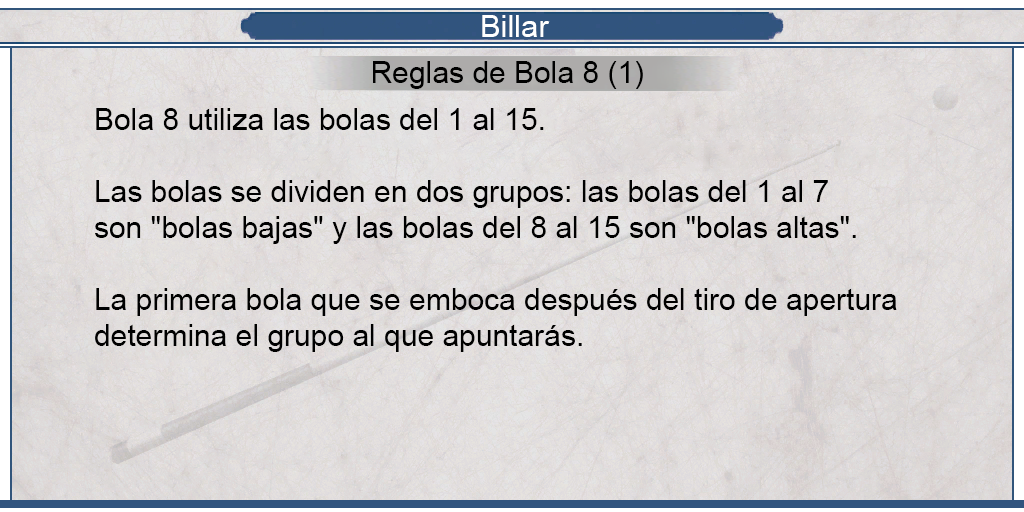
<style>
.page{position:relative;width:1024px;height:512px}
.page>*{position:absolute;margin:0}
.t1{font:30.8px "ArialMT";color:#ffffff}
.t2{font:30px "ArialMT";color:#000000}
</style>
<div class="page">
<p class="t1" style="left:482px;top:15px;width:68px;height:22px">Billar</p>
<p class="t2" style="left:373px;top:61px;width:270px;height:28px">Reglas de Bola 8 (1)</p>
<p class="t2" style="left:95px;top:108px;width:802px;height:244px;text-align:justify">Bola 8 utiliza las bolas del 1 al 15.<br><br>Las bolas se dividen en dos grupos: las bolas del 1 al 7<br>son "bolas bajas" y las bolas del 8 al 15 son "bolas altas".<br><br>La primera bola que se emboca después del tiro de apertura<br>determina el grupo al que apuntarás.</p>
</div>
